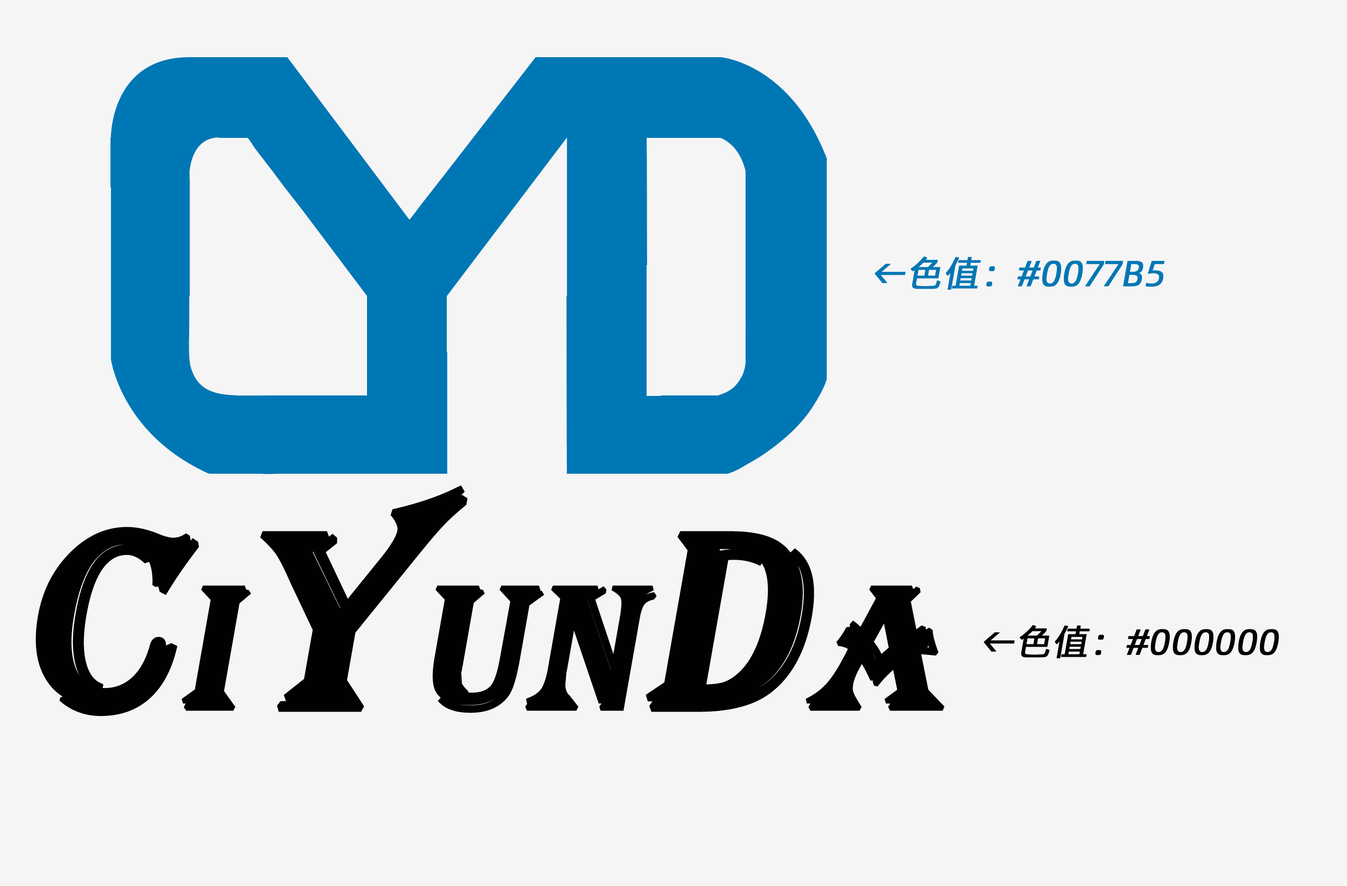
<style>
.page{position:relative;width:1347px;height:886px;background:#f5f5f5}
.page>*{position:absolute;margin:0}
.t1{font:36px "AlibabaPuHuiTi-Regular";color:#0077b5;text-transform:uppercase;font-weight:bold;font-style:italic}
.t2{font:180.1px "Algerian";color:#010101;text-transform:uppercase;font-weight:bold;font-style:italic}
.t3{font:260.1px "Algerian";color:#010101;text-transform:uppercase;font-weight:bold;font-style:italic}
.t4{font:36px "AlibabaPuHuiTi-Regular";color:#000000;text-transform:uppercase;font-weight:bold;font-style:italic}
</style>
<div class="page">
<p class="t1" style="left:874px;top:256px;width:290px;height:34px">←色值：#0077b5</p>
<p class="t2" style="left:36px;top:485px;width:908px;height:231px"><span class="t3">C</span>I<span class="t3">Y</span>UN<span class="t3">D</span>A</p>
<p class="t4" style="left:983px;top:625px;width:295px;height:33px">←色值：#000000</p>
</div>
